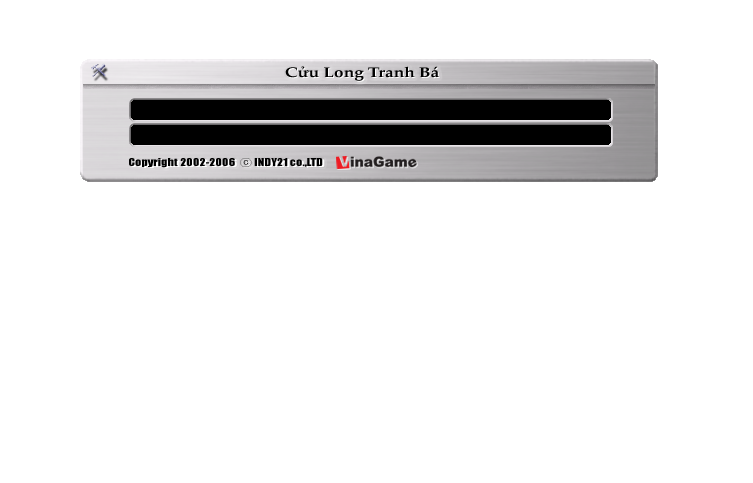
<style>
.page{position:relative;width:753px;height:483px;background:#ffffff}
.page>*{position:absolute;margin:0}
.t1{font:14px "PalatinoLinotype-Bold";color:#000000;scale:1.23 1}
.t2{font:10px "Impact";color:#000000;scale:1.23 1}
.t3{font:10px "Gulim";color:#000000;scale:1.23 1}
</style>
<div class="page">
<p class="t1" style="left:285px;top:66px;width:154px;height:15px">Cửu Long Tranh Bá</p>
<p class="t2" style="left:129px;top:158px;width:194px;height:10px">Copyright 2002-2006  <span class="t3">ⓒ</span> INDY21 co.,LTD</p>
</div>
